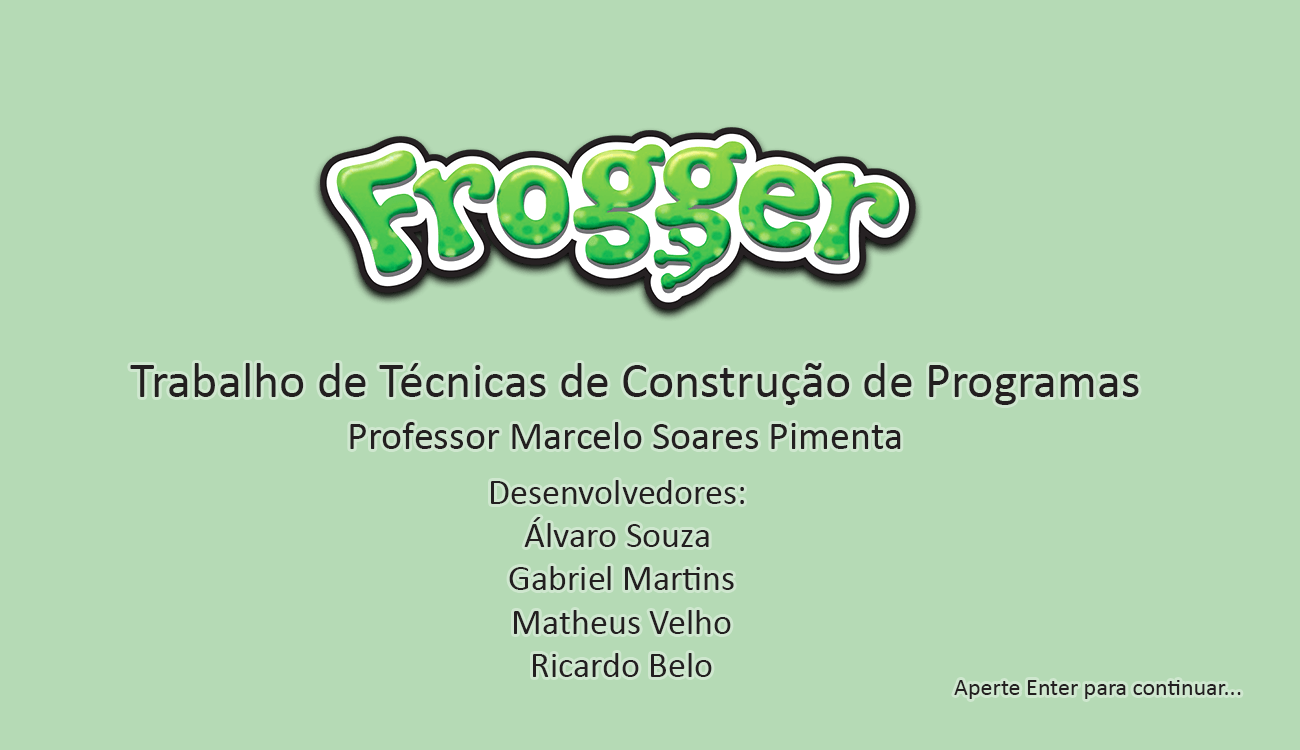
<style>
.page{position:relative;width:1300px;height:750px;background:#b5dab5}
.page>*{position:absolute;margin:0}
.t1{font:50px "Calibri";color:#231f20}
.t2{font:40px "Calibri";color:#231f20}
.t3{font:36px "Calibri";color:#231f20}
.t4{font:24px "Calibri";color:#231f20}
</style>
<div class="page">
<p class="t1" style="left:130px;top:363px;width:1009px;height:42px">Trabalho de Técnicas de Construção de Programas</p>
<p class="t2" style="left:350px;top:422px;width:551px;height:27px">Professor Marcelo Soares Pimenta</p>
<p class="t3" style="left:491px;top:480px;width:253px;height:197px;text-align:center">Desenvolvedores: <br>Álvaro Souza <br>Gabriel Martins<br>Matheus Velho<br>Ricardo Belo</p>
<p class="t4" style="left:954px;top:680px;width:287px;height:19px">Aperte Enter para continuar...</p>
</div>
